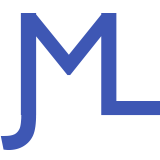
<style>
.page{position:relative;width:160px;height:160px;background:#ffffff}
.page>*{position:absolute;margin:0}
.t1{font:150px "GillSansMT";letter-spacing:-0.25em;color:#3e57b4}
</style>
<div class="page">
<p class="t1" style="left:0px;top:13px;width:162px;height:137px">JML</p>
</div>
